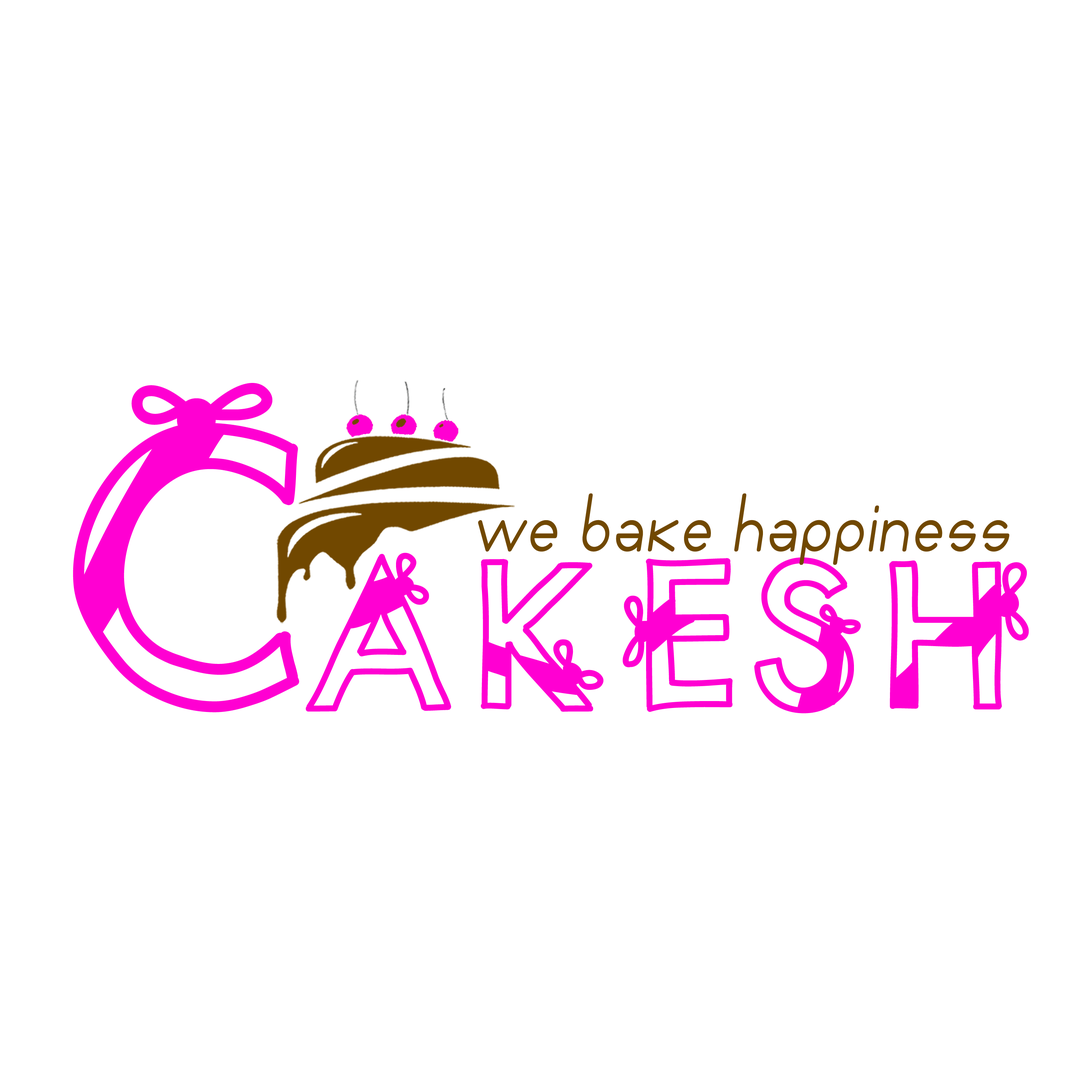
<style>
.page{position:relative;width:1092px;height:1092px;background:#ffffff}
.page>*{position:absolute;margin:0}
.t1{font:360.4px "KBRibbonsAndBows";color:#ff00d2}
.t2{font:88.6px "Giorgino";color:#714800;font-style:italic;scale:0.84 1}
.t3{font:194.9px "KBRibbonsAndBows";color:#ff00d2}
</style>
<div class="page">
<p class="t1" style="left:73px;top:383px;width:226px;height:329px">C</p>
<p class="t2" style="left:478px;top:493px;width:531px;height:72px">we bake happiness</p>
<p class="t3" style="left:306px;top:553px;width:723px;height:160px">AKESH</p>
</div>
